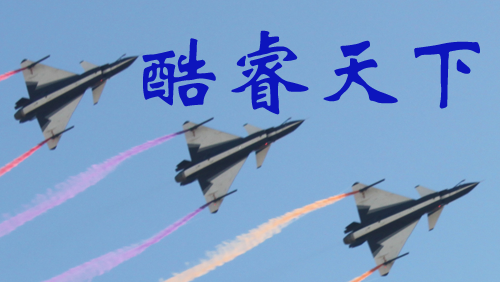
<style>
.page{position:relative;width:500px;height:282px}
.page>*{position:absolute;margin:0}
.t1{font:90px "STXinwei";color:#0d15bd}
</style>
<div class="page">
<p class="t1" style="left:142px;top:30px;width:338px;height:85px">酷睿天下</p>
</div>
